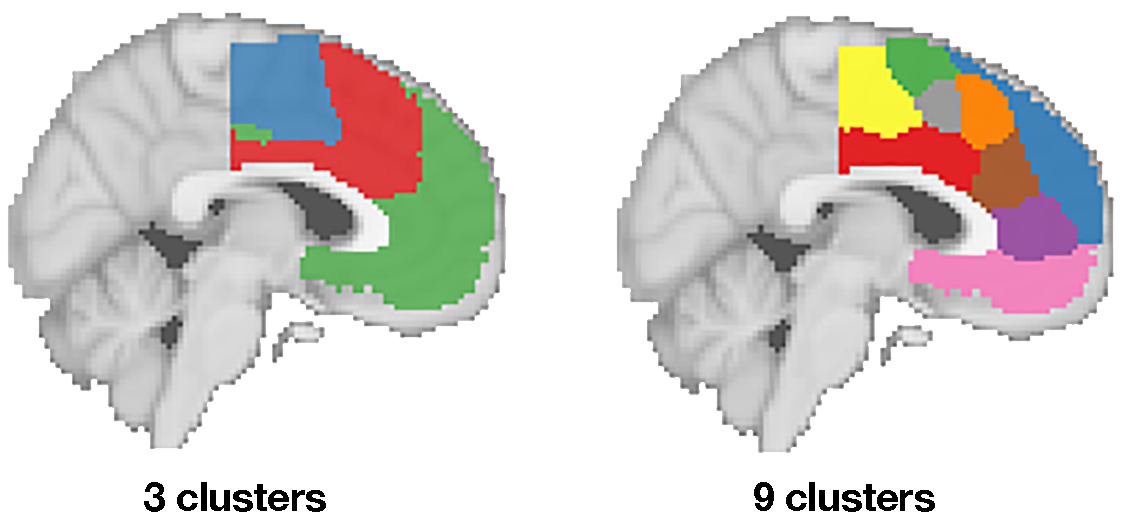
<style>
.page{position:relative;width:1124px;height:512px;background:#ffffff}
.page>*{position:absolute;margin:0}
.t1{font:40px "HelveticaNeue-Bold";letter-spacing:-0.01em;color:#000000}
</style>
<div class="page">
<p class="t1" style="left:144px;top:482px;width:182px;height:30px">3 clusters</p>
<p class="t1" style="left:754px;top:482px;width:181px;height:30px">9 clusters</p>
</div>
